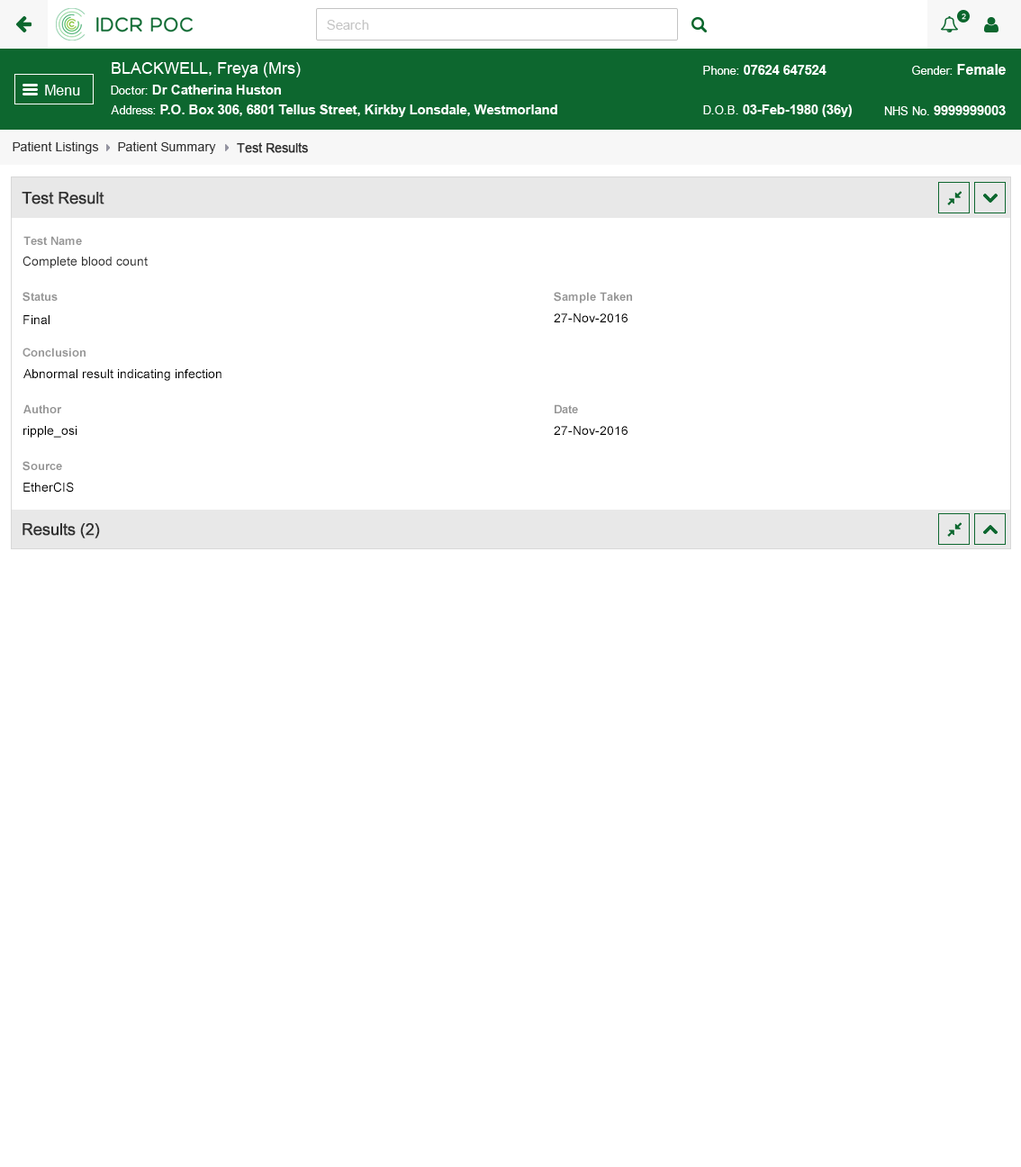
<style>
.page{position:relative;width:1021px;height:1167px;background:#ffffff}
.page>*{position:absolute;margin:0}
.t1{font:12.6px "ArialMT";color:#313131}
.t2{font:12.6px "ArialMT";color:#313131;font-weight:bold}
.t3{font:16.2px "ArialMT";color:#303030;font-weight:bold}
.t4{font:11.7px "Arial-BoldMT";color:#959595}
.t5{font:12.6px "ArialMT";color:#303030}
.t6{font:12.6px "ArialMT";color:#000000}
</style>
<div class="page">
<p class="t1" style="left:13px;top:141px;width:86px;height:13px">Patient Listings</p>
<p class="t1" style="left:118px;top:141px;width:98px;height:13px">Patient Summary</p>
<p class="t2" style="left:237px;top:142px;width:71px;height:11px">Test Results</p>
<p class="t3" style="left:22px;top:192px;width:82px;height:12px">Test Result</p>
<p class="t4" style="left:23px;top:236px;width:59px;height:9px">Test Name</p>
<p class="t5" style="left:23px;top:256px;width:125px;height:12px">Complete blood count</p>
<p class="t4" style="left:23px;top:292px;width:35px;height:10px">Status</p>
<p class="t4" style="left:554px;top:292px;width:78px;height:12px">Sample Taken</p>
<p class="t6" style="left:23px;top:315px;width:27px;height:9px">Final</p>
<p class="t6" style="left:554px;top:313px;width:74px;height:9px">27-Nov-2016</p>
<p class="t4" style="left:23px;top:348px;width:63px;height:9px">Conclusion</p>
<p class="t6" style="left:23px;top:369px;width:199px;height:12px">Abnormal result indicating infection</p>
<p class="t4" style="left:23px;top:404px;width:39px;height:9px">Author</p>
<p class="t4" style="left:555px;top:404px;width:23px;height:9px">Date</p>
<p class="t6" style="left:23px;top:426px;width:54px;height:12px">ripple_osi</p>
<p class="t6" style="left:554px;top:426px;width:74px;height:9px">27-Nov-2016</p>
<p class="t4" style="left:23px;top:461px;width:39px;height:10px">Source</p>
<p class="t6" style="left:23px;top:482px;width:51px;height:11px">EtherCIS</p>
<p class="t3" style="left:23px;top:523px;width:77px;height:16px">Results (2)</p>
</div>
